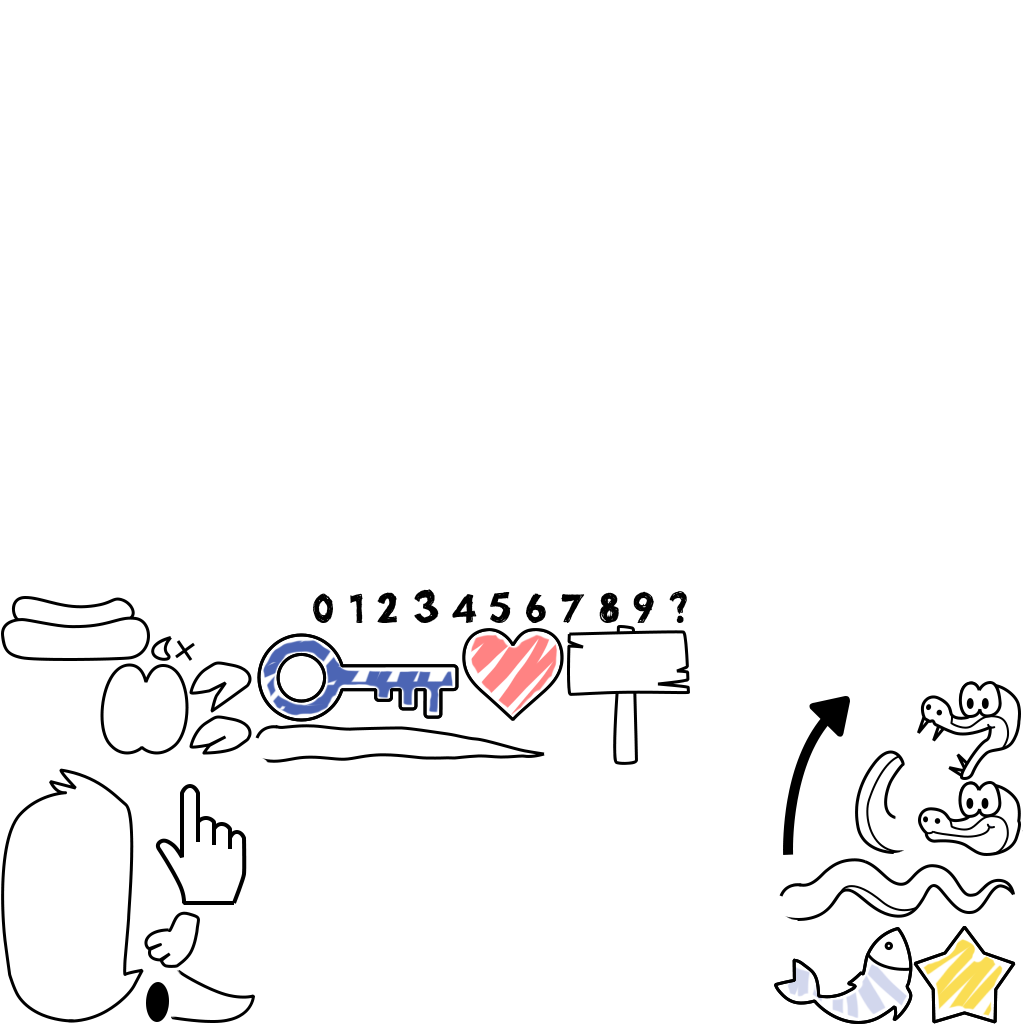
<style>
.page{position:relative;width:1024px;height:1024px;background:#ffffff}
.page>*{position:absolute;margin:0}
.t1{font:103.1px "THURSTON";color:#000000}
</style>
<div class="page">
<p class="t1" style="left:313px;top:589px;width:374px;height:34px">0 1 2 3 4 5 6 7 8 9 ?</p>
</div>
